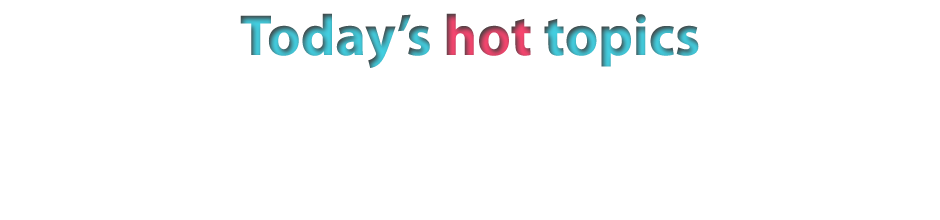
<style>
.page{position:relative;width:940px;height:220px;background:#ffffff}
.page>*{position:absolute;margin:0}
.t1{font:58px "MyriadPro-Bold"}
</style>
<div class="page">
<p class="t1" style="left:240px;top:13px;width:459px;height:55px">Today’s hot topics</p>
</div>
